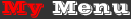
<style>
.page{position:relative;width:131px;height:19px;background:#333333}
.page>*{position:absolute;margin:0}
.t1{font:18px "VinetaBT-Regular";color:#ffffff}
.t2{font:18px "VinetaBT-Regular";color:#ff0000}
</style>
<div class="page">
<p class="t1" style="left:2px;top:1px;width:128px;height:17px"><span class="t2">My </span>Menu</p>
</div>
